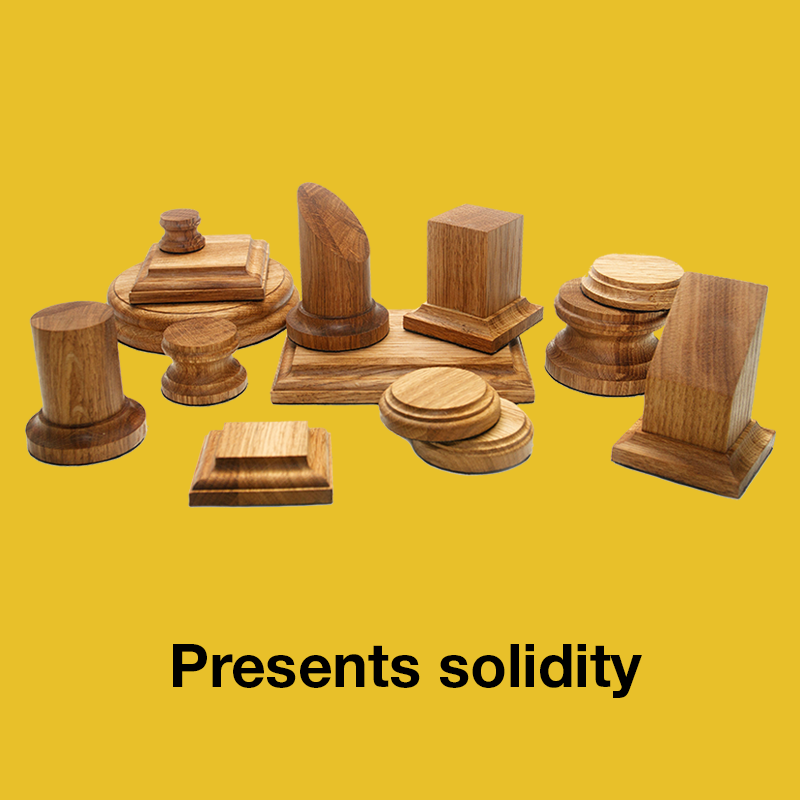
<style>
.page{position:relative;width:800px;height:800px;background:#e8c02a}
.page>*{position:absolute;margin:0}
.t1{font:60px "HelveticaNeueCyr-Bold";color:#000000}
</style>
<div class="page">
<p class="t1" style="left:173px;top:644px;width:469px;height:54px">Presents solidity</p>
</div>
